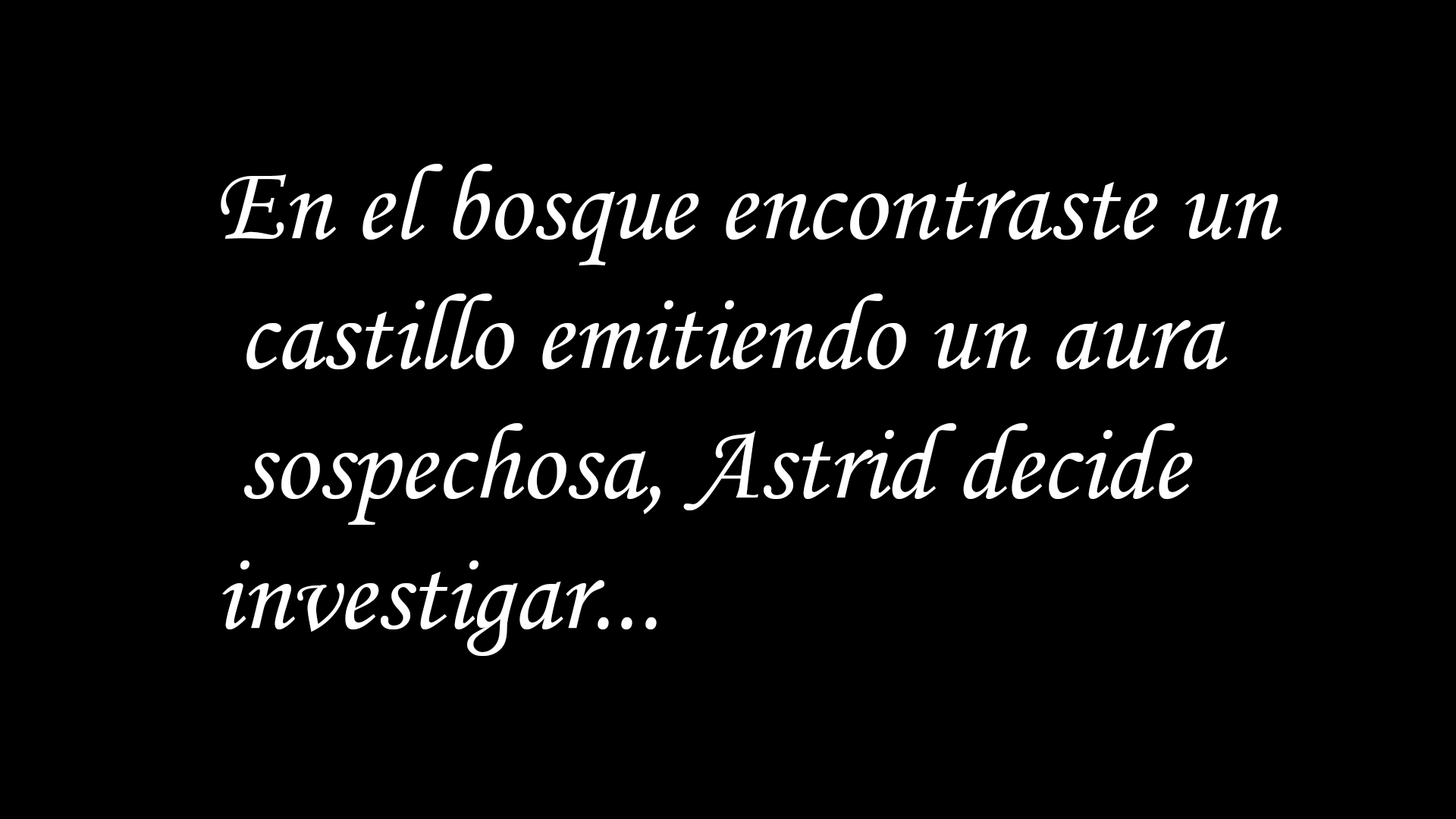
<style>
.page{position:relative;width:1456px;height:819px;background:#000000}
.page>*{position:absolute;margin:0}
.t1{font:108.2px "MonotypeCorsiva";color:#ffffff}
</style>
<div class="page">
<p class="t1" style="left:221px;top:164px;width:1061px;height:492px">En el bosque encontraste un<br> castillo emitiendo un aura<br> sospechosa, Astrid decide<br>investigar...</p>
</div>
